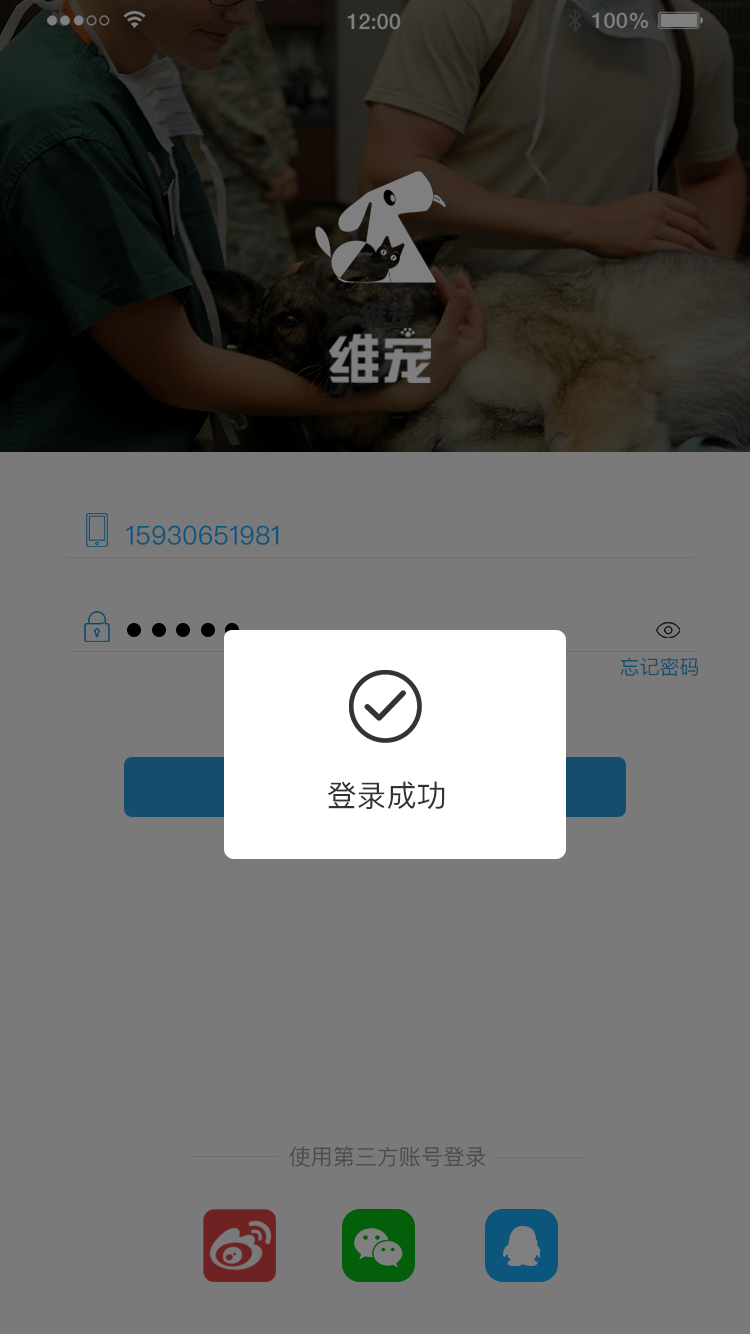
<style>
.page{position:relative;width:750px;height:1334px;background:#7a7a7a}
.page>*{position:absolute;margin:0}
.t1{font:26px "PingFangSC-Regular";color:#0c567e}
.t2{font:20px "PingFangSC-Regular";color:#154e6d}
.t3{font:30px "PingFangSC-Regular";color:#333333}
.t4{font:22px "PingFangSC-Regular";color:#4c4c4c}
</style>
<div class="page">
<p class="t1" style="left:126px;top:525px;width:153px;height:20px">15930651981</p>
<p class="t2" style="left:620px;top:657px;width:78px;height:19px">忘记密码</p>
<p class="t3" style="left:327px;top:781px;width:118px;height:28px">登录成功</p>
<p class="t4" style="left:289px;top:1146px;width:197px;height:21px">使用第三方账号登录</p>
</div>
